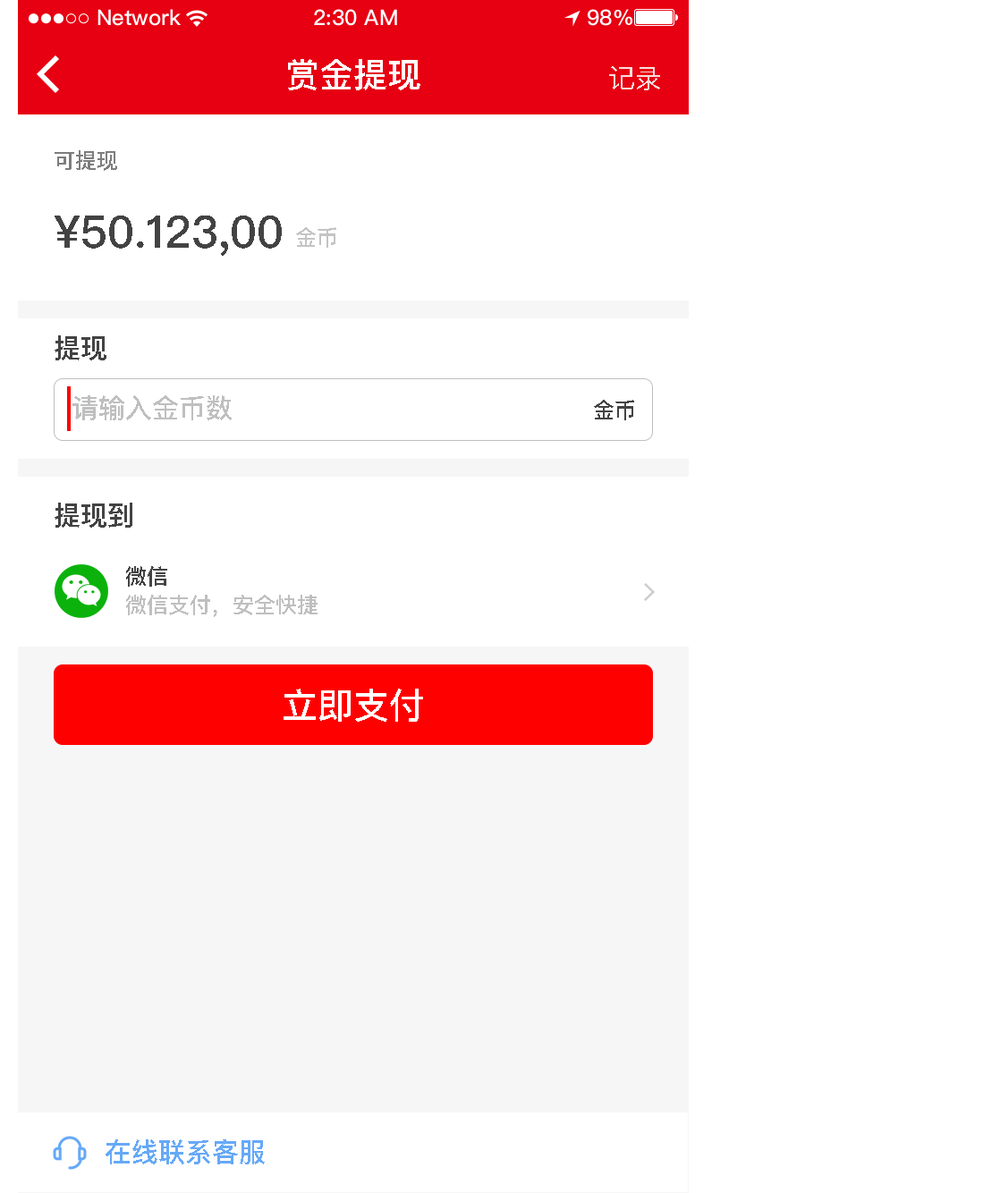
<style>
.page{position:relative;width:1000px;height:1193px;background:#ffffff}
.page>*{position:absolute;margin:0}
.t1{font:34px "PingFangSC-Medium";color:#ffffff;text-transform:uppercase}
.t2{font:26.8px "PingFangSC-Regular";color:#faddde;text-transform:uppercase}
.t3{font:21.5px "PingFangSC-Medium";color:#7d7d7d;text-transform:uppercase}
.t4{font:44.7px "PingFangSC-Medium";color:#434343;text-transform:uppercase}
.t5{font:21.5px "PingFangSC-Medium";color:#c4c4c4;text-transform:uppercase}
.t6{font:26.8px "PingFangSC-Medium";color:#434343;text-transform:uppercase}
.t7{font:26.8px "PingFangSC-Medium";color:#bfbfbf;text-transform:uppercase}
.t8{font:21.5px "PingFangSC-Medium";color:#434343;text-transform:uppercase}
.t9{font:21.5px "PingFangSC-Medium";color:#bfbfbf;text-transform:uppercase}
.t10{font:35.8px "PingFangSC-Medium";color:#ffffff;text-transform:uppercase}
.t11{font:26.8px "PingFangSC-Medium";color:#66a9f7;text-transform:uppercase}
</style>
<div class="page">
<p class="t1" style="left:288px;top:59px;width:132px;height:31px">赏金提现</p>
<p class="t2" style="left:609px;top:66px;width:51px;height:24px">记录</p>
<p class="t3" style="left:55px;top:150px;width:62px;height:21px">可提现</p>
<p class="t4" style="left:55px;top:215px;width:227px;height:41px">¥50.123,00</p>
<p class="t5" style="left:296px;top:227px;width:40px;height:21px">金币</p>
<p class="t6" style="left:55px;top:335px;width:51px;height:25px">提现</p>
<p class="t7" style="left:72px;top:395px;width:160px;height:25px">请输入金币数</p>
<p class="t8" style="left:594px;top:400px;width:40px;height:20px">金币</p>
<p class="t6" style="left:55px;top:503px;width:77px;height:25px">提现到</p>
<p class="t8" style="left:126px;top:566px;width:41px;height:21px">微信</p>
<p class="t9" style="left:126px;top:595px;width:191px;height:22px">微信支付，安全快捷</p>
<p class="t10" style="left:283px;top:689px;width:140px;height:33px">立即支付</p>
<p class="t11" style="left:106px;top:1139px;width:159px;height:25px">在线联系客服</p>
</div>
